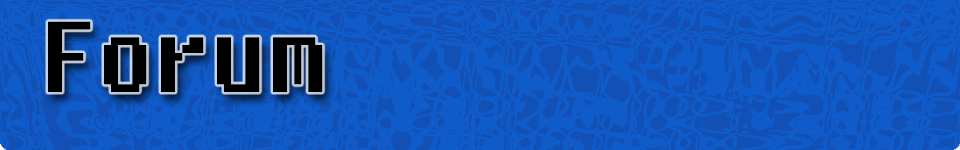
<style>
.page{position:relative;width:960px;height:150px;background:#0f5bc9}
.page>*{position:absolute;margin:0}
.t1{font:100px "Fixedsys";color:#000000;scale:0.9 1}
</style>
<div class="page">
<p class="t1" style="left:48px;top:21px;width:275px;height:71px">Forum</p>
</div>
